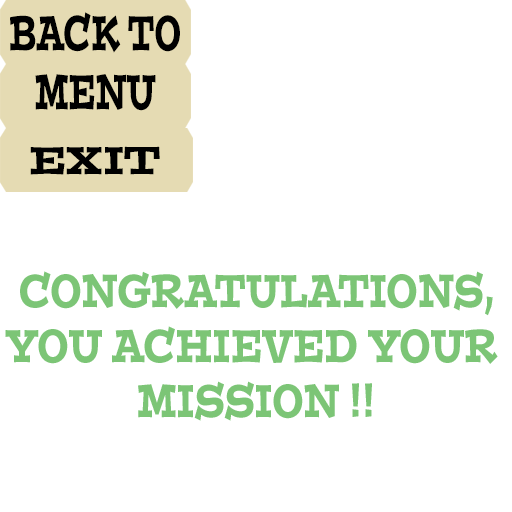
<style>
.page{position:relative;width:512px;height:512px;background:#ffffff}
.page>*{position:absolute;margin:0}
.t1{font:48.7px "PostinoStd";color:#000000;scale:0.56 1}
.t2{font:38.8px "PostinoStd";color:#000000}
.t3{font:45.9px "PostinoStd";color:#7cc576;scale:0.69 1}
</style>
<div class="page">
<p class="t1" style="left:10px;top:12px;width:170px;height:99px;text-align:center">BACK TO<br>MENU</p>
<p class="t2" style="left:30px;top:146px;width:130px;height:29px">EXIT</p>
<p class="t3" style="left:5px;top:271px;width:493px;height:150px;text-align:center">CONGRATULATIONS,<br>YOU ACHIEVED YOUR <br>MISSION !!</p>
</div>
